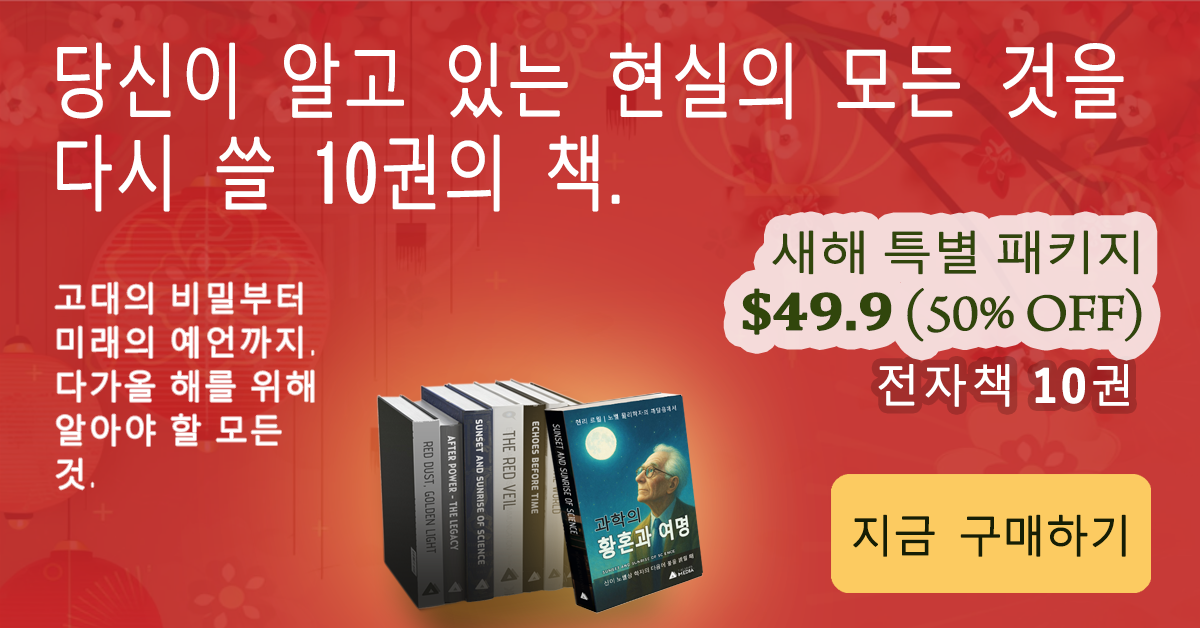
<style>
.page{position:relative;width:1200px;height:628px}
.page>*{position:absolute;margin:0}
.t1{font:79.2px/92px "MalgunGothic-Semilight";color:#ffffff;font-weight:bold;scale:0.8 1}
.t2{font:79.2px/92px "MS-Gothic";color:#ffffff;font-weight:bold;scale:0.8 1}
.t3{font:45px/60px "MalgunGothic-Semilight";letter-spacing:-0.025em;color:#31460c;font-weight:bold;scale:1.11 1}
.t4{font:54px/60px "Cambria-Bold";letter-spacing:-0.025em;color:#31460c;font-weight:bold;scale:1.11 1}
.t5{font:54px/60px "ArnoPro-LightDisplay";letter-spacing:-0.025em;color:#31460c;font-weight:bold;scale:1.11 1}
.t6{font:32.4px/44px "MalgunGothic-Semilight";letter-spacing:0.05em;color:#ffffff;font-weight:bold}
.t7{font:32.4px/44px "Chogokuboso-Gothic";letter-spacing:0.05em;color:#ffffff;font-weight:bold}
.t8{font:44px "MalgunGothic-Semilight";letter-spacing:0.05em;color:#ffffff;font-weight:bold}
.t9{font:44px "YuGothic-Bold";letter-spacing:0.05em;color:#ffffff;font-weight:bold}
.t10{font:43.2px "MalgunGothic-Semilight";letter-spacing:-0.025em;color:#151e05;font-weight:bold}
</style>
<div class="page">
<p class="t1" style="left:57px;top:42px;width:1067px;height:170px">당신이 알고 있는 현실의 모든 것을 다시 쓸<span class="t2"> 10</span>권의 책<span class="t2">.</span></p>
<p class="t3" style="left:742px;top:230px;width:400px;height:112px;text-align:right">새해 특별 패키지<br><span class="t4">$49.9</span><span class="t5"> (50% OFF)</span></p>
<p class="t6" style="left:55px;top:282px;width:259px;height:208px">고대의 비밀부터 미래의 예언까지<span class="t7">. </span>다가올 해를 위해 알아야 할 모든 것<span class="t7">.</span></p>
<p class="t8" style="left:878px;top:364px;width:251px;height:43px">전자책 <span class="t9">10</span>권</p>
<p class="t10" style="left:853px;top:514px;width:273px;height:43px">지금 구매하기</p>
</div>
